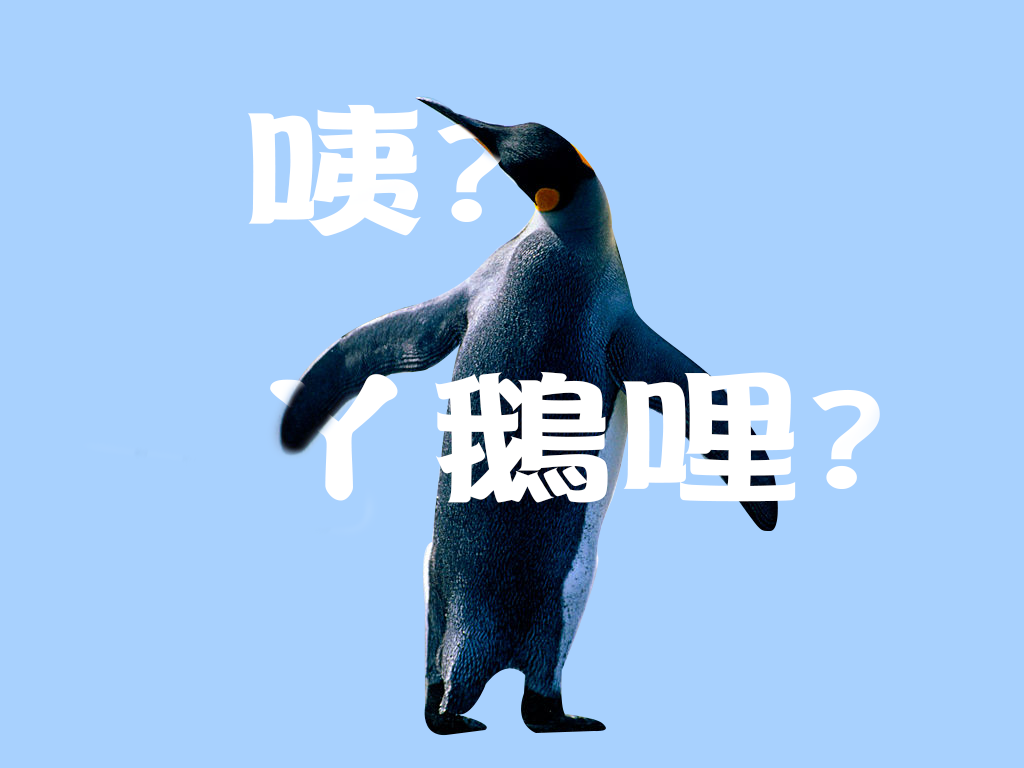
<style>
.page{position:relative;width:1024px;height:768px;background:#a8d1fe}
.page>*{position:absolute;margin:0}
.t1{font:143.1px/266.7px "DFPOP2Std-W9";color:#ffffff;scale:1.31 1}
</style>
<div class="page">
<p class="t1" style="left:247px;top:104px;width:633px;height:399px">咦?<br>ㄚ鵝哩?</p>
</div>
